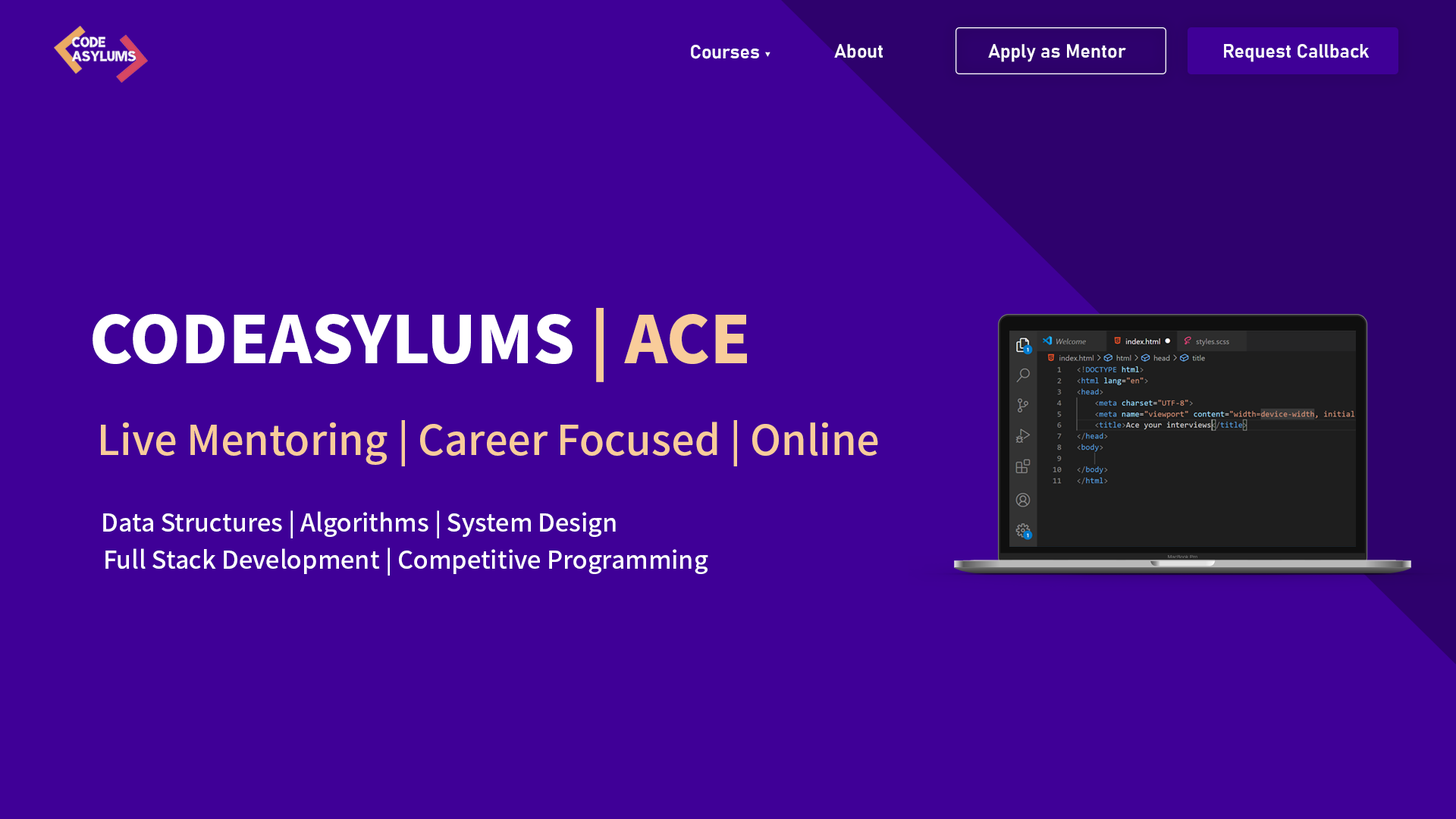
<style>
.page{position:relative;width:1456px;height:819px;background:#3f0097}
.page>*{position:absolute;margin:0}
.t1{font:19px "Bahnschrift-SemiBold";color:#ffffff}
.t2{font:64.8px "NotoSansJP-Black";color:#ffffff}
.t3{font:64.8px "NotoSansJP-Black";color:#f9cc9a}
.t4{font:41.1px "NotoSansJP-Medium";color:#f9cc9a}
.t5{font:24.5px "NotoSansJP-Medium";color:#ffffff}
</style>
<div class="page">
<p class="t1" style="left:691px;top:45px;width:68px;height:14px">Courses</p>
<p class="t1" style="left:834px;top:44px;width:49px;height:14px">About</p>
<p class="t1" style="left:988px;top:44px;width:138px;height:18px">Apply as Mentor</p>
<p class="t1" style="left:1224px;top:44px;width:146px;height:18px">Request Callback</p>
<p class="t2" style="left:93px;top:308px;width:654px;height:74px">CODEASYLUMS <span class="t3">| ACE</span></p>
<p class="t4" style="left:101px;top:420px;width:777px;height:46px">Live Mentoring | Career Focused | Online</p>
<p class="t5" style="left:103px;top:510px;width:513px;height:28px">Data Structures | Algorithms | System Design</p>
<p class="t5" style="left:105px;top:548px;width:603px;height:28px">Full Stack Development | Competitive Programming</p>
</div>
